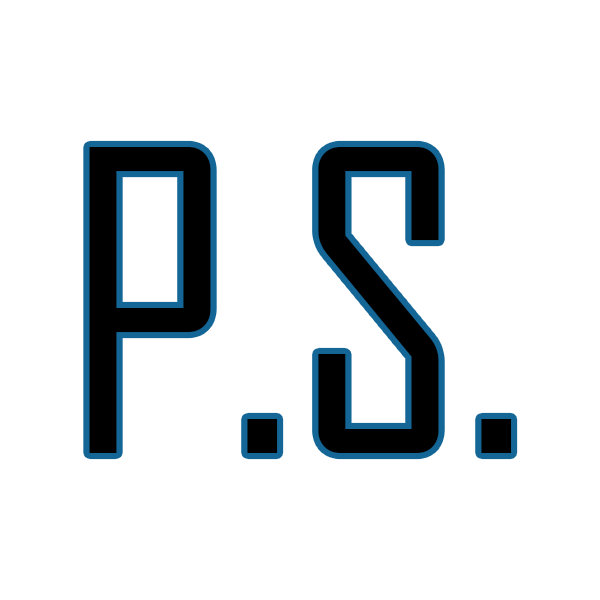
<style>
.page{position:relative;width:600px;height:600px;background:#ffffff}
.page>*{position:absolute;margin:0}
.t1{font:400px "AgencyFB-Reg";color:#000000}
</style>
<div class="page">
<p class="t1" style="left:89px;top:147px;width:423px;height:306px">P.S.</p>
</div>
